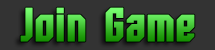
<style>
.page{position:relative;width:215px;height:50px;background:#333333}
.page>*{position:absolute;margin:0}
.t1{font:47.9px "Whitestone-Bold"}
</style>
<div class="page">
<p class="t1" style="left:20px;top:7px;width:175px;height:35px">Join Game</p>
</div>
